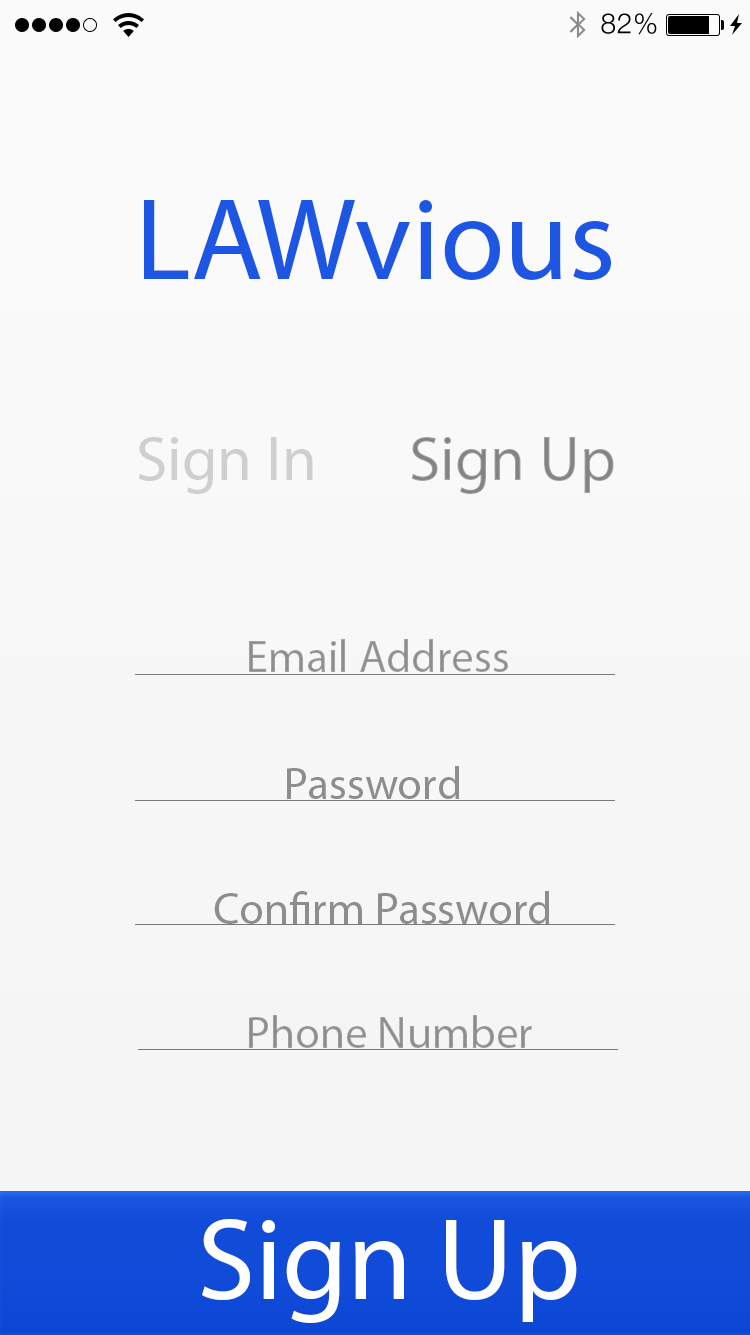
<style>
.page{position:relative;width:750px;height:1335px}
.page>*{position:absolute;margin:0}
.t1{font:28px "HelveticaNeue-Light";letter-spacing:0.025em;color:#000000}
.t2{font:117.7px "MyriadPro-Regular";color:#1d56e3}
.t3{font:63.4px "MyriadPro-Regular";color:#d0cfcf}
.t4{font:63.4px "MyriadPro-Regular";color:#848383}
.t5{font:45.3px "MyriadPro-Regular";color:#8e8d8d}
.t6{font:117.7px "MyriadPro-Regular";color:#ffffff}
</style>
<div class="page">
<p class="t1" style="left:601px;top:13px;width:56px;height:22px">82%</p>
<p class="t2" style="left:144px;top:199px;width:467px;height:82px">LAWvious</p>
<p class="t3" style="left:138px;top:437px;width:175px;height:57px">Sign In</p>
<p class="t4" style="left:411px;top:437px;width:203px;height:57px">Sign Up</p>
<p class="t5" style="left:249px;top:639px;width:259px;height:33px">Email Address</p>
<p class="t5" style="left:287px;top:766px;width:173px;height:33px">Password</p>
<p class="t5" style="left:214px;top:891px;width:336px;height:33px">Confirm Password</p>
<p class="t5" style="left:249px;top:1015px;width:283px;height:33px">Phone Number</p>
<p class="t6" style="left:202px;top:1219px;width:375px;height:104px">Sign Up</p>
</div>
